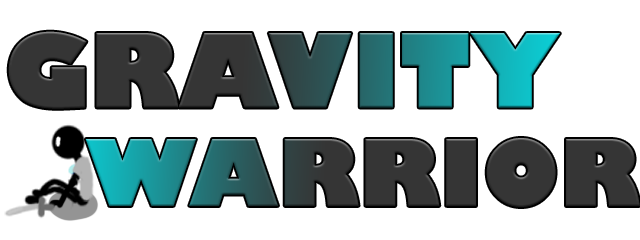
<style>
.page{position:relative;width:640px;height:240px;background:#ffffff}
.page>*{position:absolute;margin:0}
.t1{font:100px "GillSans-UltraBold"}
.t2{font:90px "GillSans-UltraBold"}
</style>
<div class="page">
<p class="t1" style="left:8px;top:31px;width:552px;height:78px">GRAVITY</p>
<p class="t2" style="left:85px;top:138px;width:555px;height:69px">WARRIOR</p>
</div>
